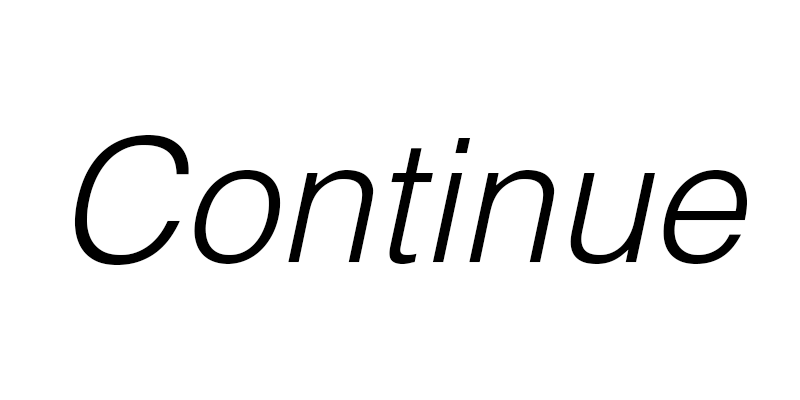
<style>
.page{position:relative;width:800px;height:400px;background:#ffffff}
.page>*{position:absolute;margin:0}
.t1{font:172px "Helvetica-LightOblique";color:#000000}
</style>
<div class="page">
<p class="t1" style="left:74px;top:135px;width:673px;height:130px">Continue</p>
</div>
